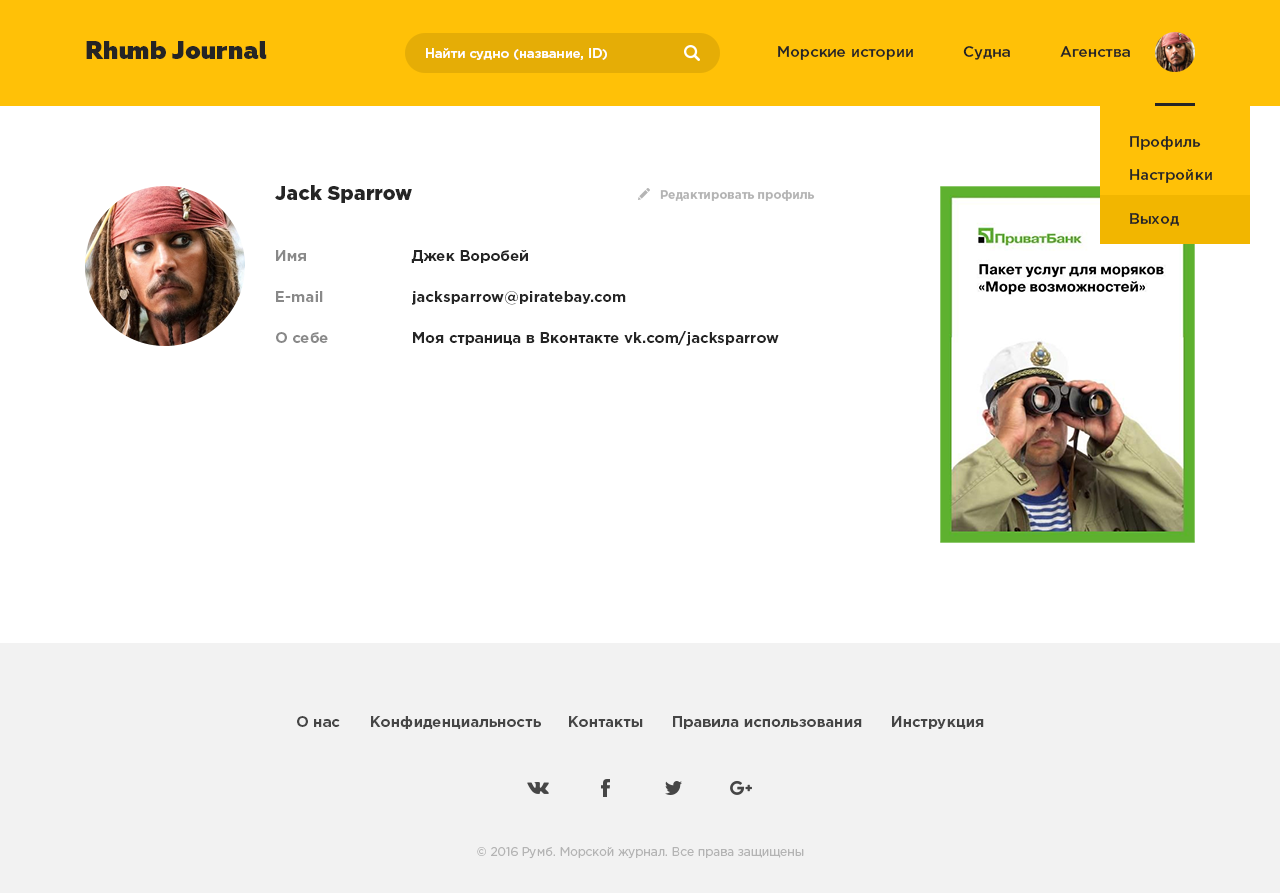
<style>
.page{position:relative;width:1280px;height:893px;background:#ffffff}
.page>*{position:absolute;margin:0}
.t1{font:25px "Geometria-Heavy";color:#252525}
.t2{font:13px "GothamPro-Medium";color:#ffffff}
.t3{font:15px "GothamPro-Medium";color:#252525}
.t4{font:20px "GothamPro-Black";color:#252525}
.t5{font:12px "GothamPro-Bold";color:#b4b4b4}
.t6{font:15px "GothamPro-Bold";color:#898989}
.t7{font:15px "GothamPro-Bold";color:#252525}
.t8{font:15px "GothamPro-Bold";color:#464646}
.t9{font:12px "GothamPro";color:#b4b4b4}
</style>
<div class="page">
<p class="t1" style="left:86px;top:41px;width:181px;height:18px">Rhumb Journal</p>
<p class="t2" style="left:426px;top:48px;width:181px;height:12px">Найти судно (название, ID)</p>
<p class="t3" style="left:778px;top:46px;width:135px;height:14px">Морские истории</p>
<p class="t3" style="left:963px;top:46px;width:47px;height:14px">Судна</p>
<p class="t3" style="left:1060px;top:46px;width:70px;height:11px">Агенства</p>
<p class="t3" style="left:1130px;top:136px;width:71px;height:14px">Профиль</p>
<p class="t3" style="left:1130px;top:169px;width:82px;height:14px">Настройки</p>
<p class="t4" style="left:275px;top:185px;width:137px;height:18px">Jack Sparrow</p>
<p class="t5" style="left:660px;top:190px;width:155px;height:11px">Редактировать профиль</p>
<p class="t3" style="left:1130px;top:213px;width:50px;height:13px">Выход</p>
<p class="t6" style="left:276px;top:250px;width:30px;height:11px">Имя</p>
<p class="t7" style="left:411px;top:250px;width:117px;height:13px">Джек Воробей</p>
<p class="t6" style="left:276px;top:291px;width:47px;height:11px">E-mail</p>
<p class="t7" style="left:412px;top:291px;width:214px;height:14px">jacksparrow@piratebay.com</p>
<p class="t6" style="left:276px;top:332px;width:52px;height:11px">О себе</p>
<p class="t7" style="left:413px;top:331px;width:366px;height:15px">Моя страница в Вконтакте vk.com/jacksparrow</p>
<p class="t8" style="left:297px;top:716px;width:43px;height:11px">О нас</p>
<p class="t8" style="left:371px;top:716px;width:170px;height:13px">Конфиденциальность</p>
<p class="t8" style="left:569px;top:716px;width:74px;height:11px">Контакты</p>
<p class="t8" style="left:673px;top:716px;width:189px;height:13px">Правила использования</p>
<p class="t8" style="left:892px;top:716px;width:92px;height:13px">Инструкция</p>
<p class="t9" style="left:477px;top:847px;width:327px;height:12px">© 2016 Румб. Морской журнал. Все права защищены</p>
</div>
